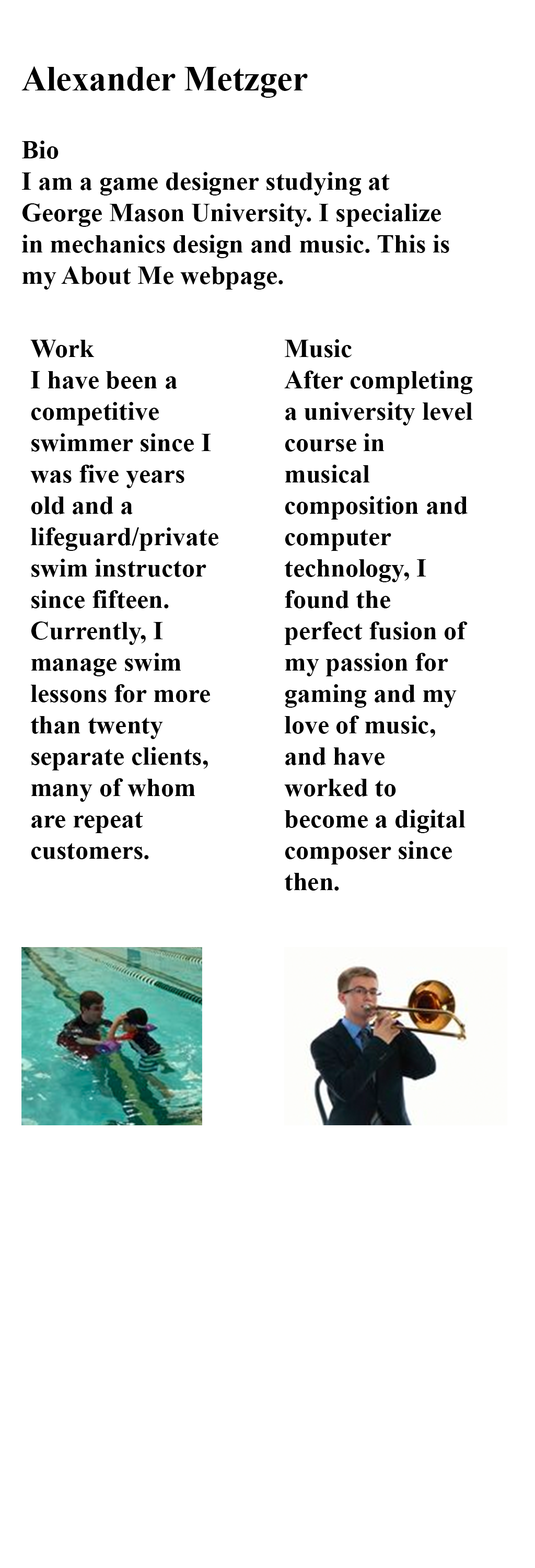
<style>
.page{position:relative;width:535px;height:1568px;background:#ffffff}
.page>*{position:absolute;margin:0}
.t1{font:34.8px "TimesNewRomanPS-BoldMT";color:#000000}
.t2{font:26.1px "TimesNewRomanPS-BoldMT";color:#000000}
</style>
<div class="page">
<p class="t1" style="left:21px;top:66px;width:287px;height:32px">Alexander Metzger</p>
<p class="t2" style="left:22px;top:141px;width:427px;height:149px">Bio<br>I am a game designer studying at George Mason University. I specialize in mechanics design and music. This is my About Me webpage.</p>
<p class="t2" style="left:30px;top:340px;width:188px;height:519px">Work<br>I have been a competitive swimmer since I was five years old and a lifeguard/private swim instructor since fifteen. Currently, I manage swim lessons for more than twenty separate clients, many of whom are repeat customers.</p>
<p class="t2" style="left:284px;top:339px;width:189px;height:552px">Music<br>After completing a university level course in musical composition and computer technology, I found the perfect fusion of my passion for gaming and my love of music, and have worked to become a digital composer since then.</p>
</div>
